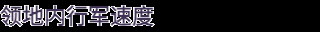
<style>
.page{position:relative;width:320px;height:32px;background:#000000}
.page>*{position:absolute;margin:0}
.t1{font:22px "WebPSD-18463539-0-Regular";color:#3f3254;font-weight:bold}
</style>
<div class="page">
<p class="t1" style="left:0px;top:0px;width:320px;height:32px">领地内行军速度</p>
</div>
